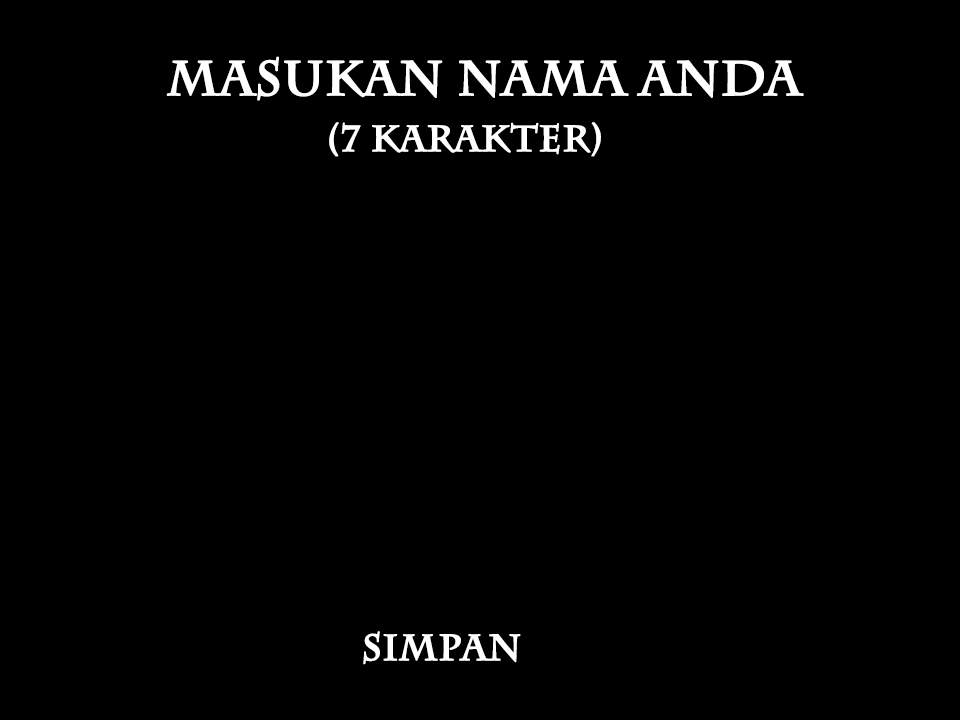
<style>
.page{position:relative;width:960px;height:720px;background:#000000}
.page>*{position:absolute;margin:0}
.t1{font:48px "CharlemagneStd-Bold";color:#ffffff;font-weight:bold}
.t2{font:36px "CharlemagneStd-Bold";color:#ffffff;font-weight:bold}
</style>
<div class="page">
<p class="t1" style="left:166px;top:56px;width:638px;height:45px">masukan nama anda</p>
<p class="t2" style="left:329px;top:122px;width:272px;height:35px">(7 Karakter)</p>
<p class="t2" style="left:363px;top:631px;width:158px;height:34px">SIMPAN</p>
</div>
